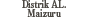
<style>
.page{position:relative;width:88px;height:19px;background:#ffffff}
.page>*{position:absolute;margin:0}
.t1{font:10px/9px "RyuminPro-ExBold";letter-spacing:-0.04em;color:#4c4843;scale:0.9 1}
</style>
<div class="page">
<p class="t1" style="left:22px;top:0px;width:44px;height:17px;text-align:center">Distrik AL.<br>Maizuru</p>
</div>
